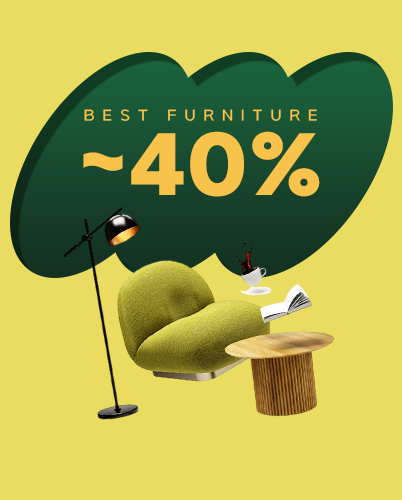
<style>
.page{position:relative;width:402px;height:500px;background:#eadc60}
.page>*{position:absolute;margin:0}
.t1{font:13.6px "SBAggroL";letter-spacing:0.6em;color:#f7c34b;text-transform:uppercase}
.t2{font:77.3px "SBAggroB";letter-spacing:0.02em;color:#f7c34b;text-transform:uppercase}
</style>
<div class="page">
<p class="t1" style="left:84px;top:109px;width:233px;height:12px">BEST Furniture</p>
<p class="t2" style="left:83px;top:131px;width:237px;height:66px">~40%</p>
</div>
